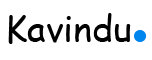
<style>
.page{position:relative;width:152px;height:60px;background:#ffffff}
.page>*{position:absolute;margin:0}
.t1{font:36px "ComicSansMS";color:#010101}
.t2{font:100px "ComicSansMS";color:#0086ed}
</style>
<div class="page">
<p class="t1" style="left:8px;top:13px;width:123px;height:31px">Kavindu</p>
<p class="t2" style="left:134px;top:30px;width:13px;height:12px">.</p>
</div>
